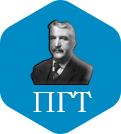
<style>
.page{position:relative;width:121px;height:134px;background:#008bc4}
.page>*{position:absolute;margin:0}
.t1{font:30px "BookmanOldStyle";color:#ffffff}
</style>
<div class="page">
<p class="t1" style="left:33px;top:91px;width:59px;height:21px">ПГТ</p>
</div>
